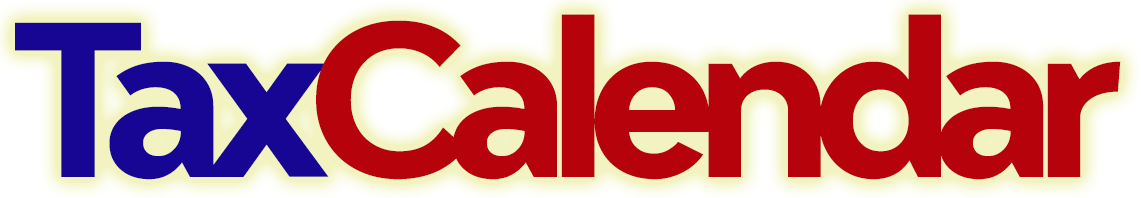
<style>
.page{position:relative;width:1141px;height:198px;background:#b6030b}
.page>*{position:absolute;margin:0}
.t1{font:208.3px "Adlinnaka-BoldDemo";letter-spacing:-0.1em;color:#b6030b}
.t2{font:208.3px "Adlinnaka-BoldDemo";letter-spacing:-0.1em;color:#170694}
</style>
<div class="page">
<p class="t1" style="left:15px;top:14px;width:1106px;height:166px"><span class="t2">Tax</span>Calendar</p>
</div>
